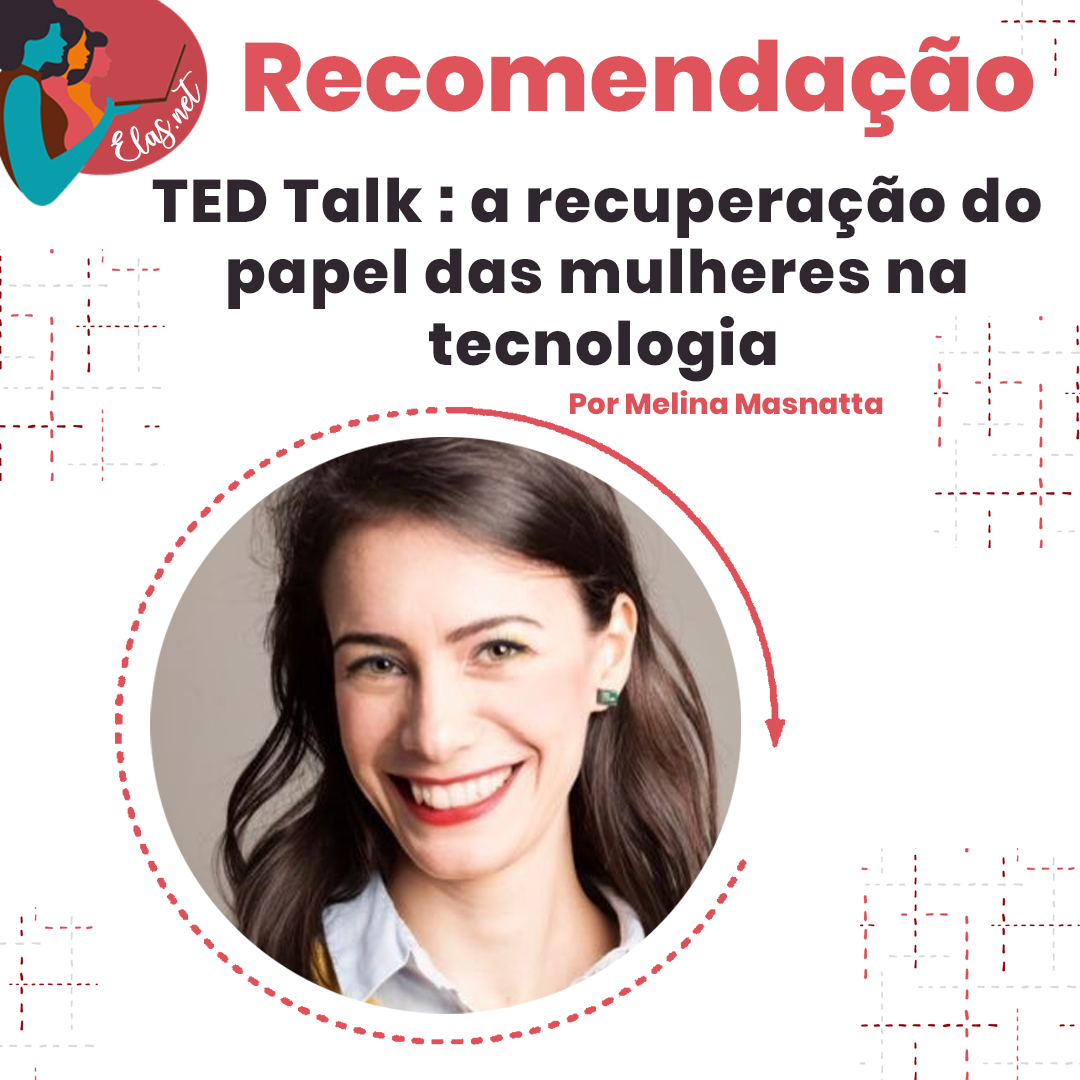
<style>
.page{position:relative;width:1080px;height:1080px;background:#ffffff}
.page>*{position:absolute;margin:0}
.t1{font:96.7px "Poppins-ExtraBold";letter-spacing:0.005em;color:#df5158}
.t2{font:25.7px "charlinda-Regular";color:#ffffff;scale:1.18 1}
.t3{font:60px/71.3px "Poppins-ExtraBold";letter-spacing:0.03em;color:#2f262f}
.t4{font:29.2px "Poppins-ExtraBold";letter-spacing:0.005em;color:#df5158}
</style>
<div class="page">
<p class="t1" style="left:245px;top:36px;width:789px;height:101px">Recomendação</p>
<p class="t2" style="left:110px;top:71px;width:90px;height:91px;rotate:-43deg">Elas.net</p>
<p class="t3" style="left:152px;top:175px;width:889px;height:207px;text-align:center">TED Talk : a recuperação do <br>papel das mulheres na <br>tecnologia</p>
<p class="t4" style="left:570px;top:390px;width:313px;height:25px">Por Melina Masnatta</p>
</div>
